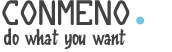
<style>
.page{position:relative;width:172px;height:52px;background:#ffffff}
.page>*{position:absolute;margin:0}
.t1{font:38px "DataControl";color:#424242}
.t2{font:21px "KentuckyFriedChickenFont";color:#424242}
</style>
<div class="page">
<p class="t1" style="left:2px;top:0px;width:128px;height:25px">Conmeno</p>
<p class="t2" style="left:4px;top:28px;width:122px;height:21px">do what you want</p>
</div>
